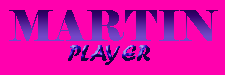
<style>
.page{position:relative;width:225px;height:75px;background:#ff01ae}
.page>*{position:absolute;margin:0}
.t1{font:42px "Elephant-Regular"}
.t2{font:24px "ForteMT"}
</style>
<div class="page">
<p class="t1" style="left:9px;top:10px;width:209px;height:31px">MARTIN</p>
<p class="t2" style="left:68px;top:45px;width:82px;height:20px">PLAYER</p>
</div>
